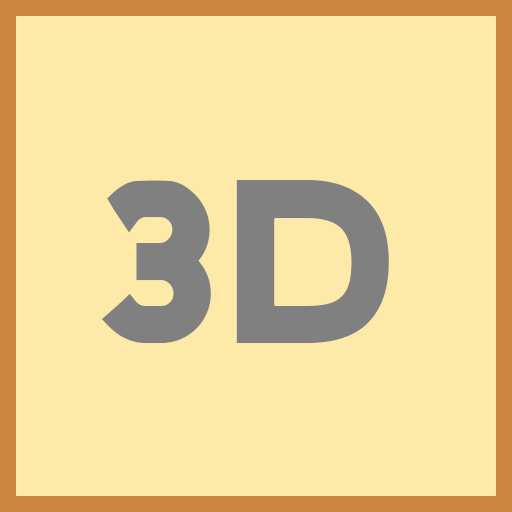
<style>
.page{position:relative;width:512px;height:512px;background:#fdeaa8}
.page>*{position:absolute;margin:0}
.t1{font:233.3px "DOCKERONE";color:#808080}
</style>
<div class="page">
<p class="t1" style="left:101px;top:180px;width:288px;height:163px">3D</p>
</div>
